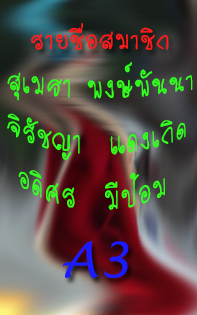
<style>
.page{position:relative;width:197px;height:315px}
.page>*{position:absolute;margin:0}
.t1{font:36px "TXThongmuan";color:#ff1b1b}
.t2{font:36px "TXThongmuan";color:#30ff1b}
.t3{font:48px "LucidaHandwriting-Italic";color:#1b1bff}
</style>
<div class="page">
<p class="t1" style="left:31px;top:23px;width:138px;height:27px">รายชื่อสมาชิก</p>
<p class="t2" style="left:7px;top:62px;width:186px;height:148px">สุเมธา พงษ์พันนา<br>จิรัชญา  แดงเกิด<br> อดิศร  มีป้อม</p>
<p class="t3" style="left:62px;top:241px;width:67px;height:37px">A3</p>
</div>
